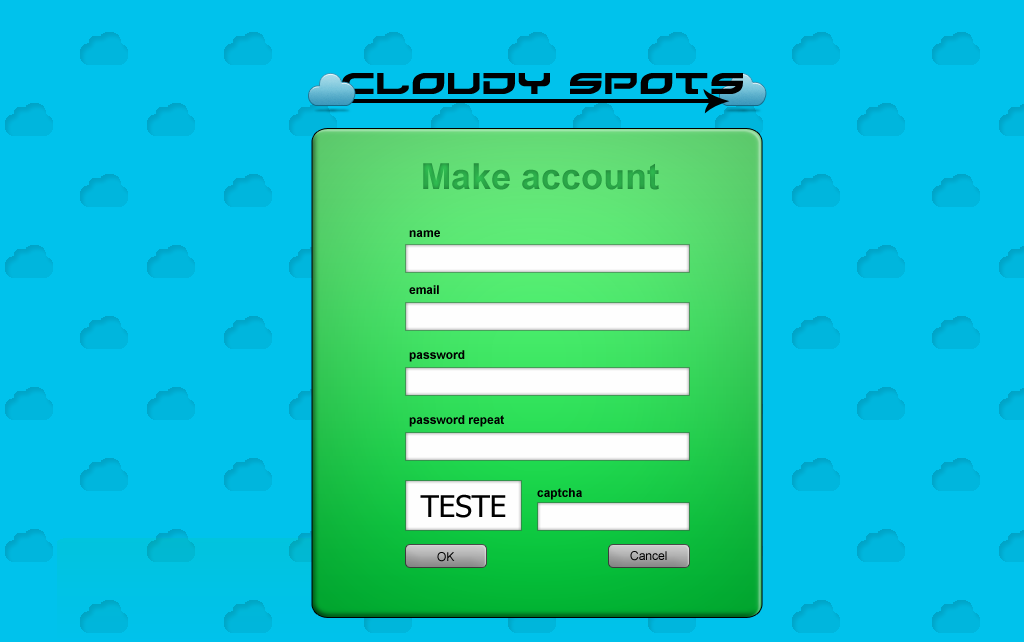
<style>
.page{position:relative;width:1024px;height:642px;background:#00c2ec}
.page>*{position:absolute;margin:0}
.t1{font:36px "Arial-BoldMT";color:#2aa547}
.t2{font:12px "Arial-BoldMT";color:#000000}
.t3{font:30px "Tahoma";color:#000000}
.t4{font:12px "ArialMT";color:#000000}
</style>
<div class="page">
<p class="t1" style="left:423px;top:163px;width:236px;height:27px">Make account</p>
<p class="t2" style="left:409px;top:230px;width:31px;height:7px">name</p>
<p class="t2" style="left:409px;top:285px;width:30px;height:9px">email</p>
<p class="t2" style="left:409px;top:350px;width:56px;height:12px">password</p>
<p class="t2" style="left:409px;top:415px;width:95px;height:12px">password repeat</p>
<p class="t3" style="left:420px;top:494px;width:86px;height:24px">TESTE</p>
<p class="t2" style="left:537px;top:488px;width:45px;height:12px">captcha</p>
<p class="t4" style="left:437px;top:552px;width:18px;height:10px">OK</p>
<p class="t4" style="left:630px;top:551px;width:37px;height:10px">Cancel</p>
</div>
